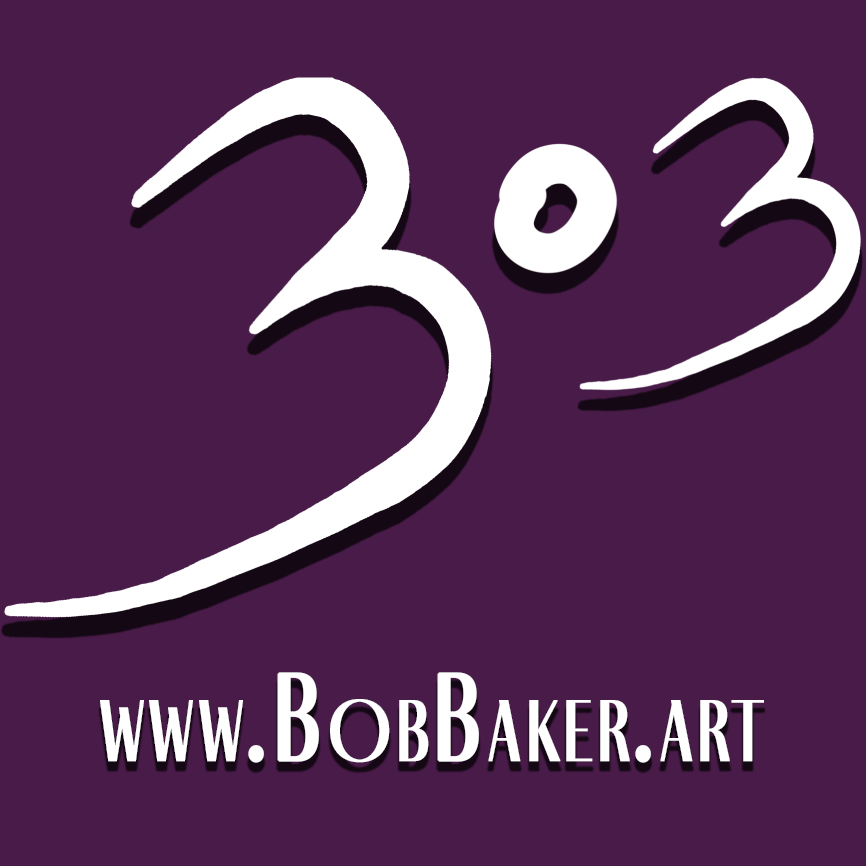
<style>
.page{position:relative;width:866px;height:866px;background:#481b48}
.page>*{position:absolute;margin:0}
.t1{font:127.1px "FinoSans-Regular";letter-spacing:0.02em;color:#ffffff;font-variant:small-caps;font-weight:bold;scale:0.89 1}
</style>
<div class="page">
<p class="t1" style="left:100px;top:672px;width:664px;height:91px">www.BobBaker.art</p>
</div>
